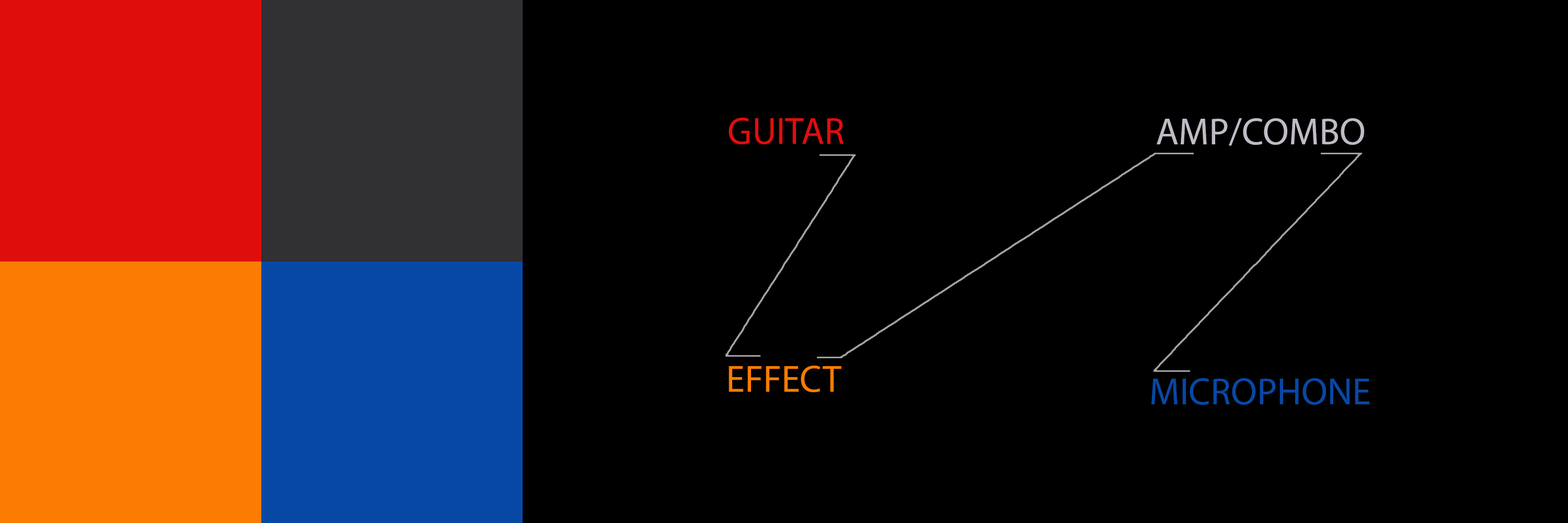
<style>
.page{position:relative;width:1568px;height:523px;background:#000000}
.page>*{position:absolute;margin:0}
.t1{font:37.6px "MyriadPro-Regular";color:#df0e0d}
.t2{font:37.6px "MyriadPro-Regular";color:#c0bbc5}
.t3{font:37.6px "MyriadPro-Regular";color:#fb7c00}
.t4{font:37.6px "MyriadPro-Regular";color:#0848a5}
</style>
<div class="page">
<p class="t1" style="left:729px;top:118px;width:115px;height:26px">GUITAR</p>
<p class="t2" style="left:1157px;top:118px;width:207px;height:28px">AMP/COMBO</p>
<p class="t3" style="left:729px;top:365px;width:112px;height:27px">EFFECT</p>
<p class="t4" style="left:1151px;top:378px;width:218px;height:27px">MICROPHONE</p>
</div>
